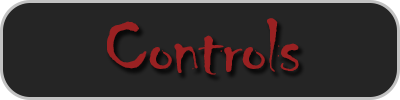
<style>
.page{position:relative;width:400px;height:100px;background:#252525}
.page>*{position:absolute;margin:0}
.t1{font:80px "Chiller-Regular";letter-spacing:-0.025em;color:#992122;scale:1.08 1}
</style>
<div class="page">
<p class="t1" style="left:107px;top:18px;width:192px;height:57px">Controls</p>
</div>
